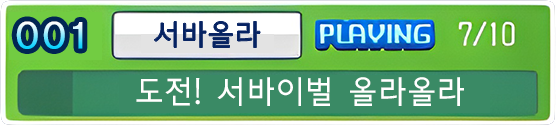
<style>
.page{position:relative;width:556px;height:125px}
.page>*{position:absolute;margin:0}
.t1{font:38.4px "HakgyoansimSantteutdotumM";letter-spacing:0.06em;scale:1.22 1}
.t2{font:28.6px "HakgyoansimSantteutdotumM";letter-spacing:0.06em;color:#052262}
.t3{font:31.5px "HakgyoansimSantteutdotumM";letter-spacing:0.06em;color:#ffffff;scale:0.97 1}
</style>
<div class="page">
<p class="t1" style="left:16px;top:21px;width:67px;height:28px">001</p>
<p class="t2" style="left:154px;top:21px;width:106px;height:27px">서바올라</p>
<p class="t3" style="left:136px;top:77px;width:328px;height:29px">도전! 서바이벌 올라올라</p>
</div>
